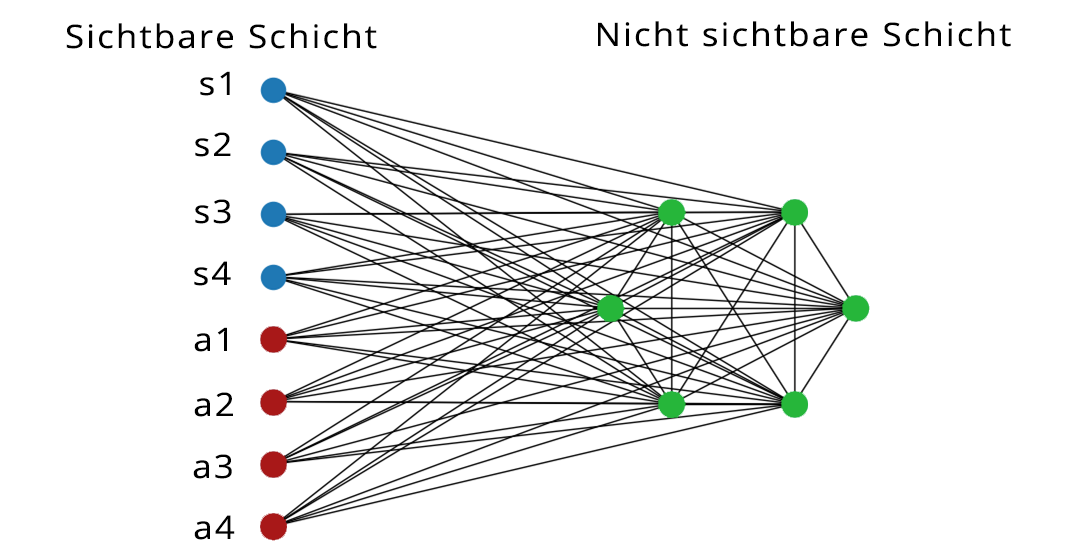
<style>
.page{position:relative;width:1080px;height:560px;background:#ffffff}
.page>*{position:absolute;margin:0}
.t1{font:32.4px "OpenSans-Regular";letter-spacing:0.06em;color:#000000;scale:1.08 1}
</style>
<div class="page">
<p class="t1" style="left:66px;top:23px;width:311px;height:26px">Sichtbare Schicht</p>
<p class="t1" style="left:598px;top:21px;width:413px;height:26px">Nicht sichtbare Schicht</p>
<p class="t1" style="left:200px;top:71px;width:30px;height:25px">s1</p>
<p class="t1" style="left:195px;top:132px;width:36px;height:25px">s2</p>
<p class="t1" style="left:195px;top:199px;width:36px;height:25px">s3</p>
<p class="t1" style="left:194px;top:261px;width:37px;height:25px">s4</p>
<p class="t1" style="left:194px;top:327px;width:33px;height:25px">a1</p>
<p class="t1" style="left:194px;top:392px;width:39px;height:25px">a2</p>
<p class="t1" style="left:193px;top:454px;width:39px;height:25px">a3</p>
<p class="t1" style="left:194px;top:515px;width:41px;height:25px">a4</p>
</div>
